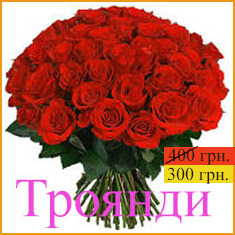
<style>
.page{position:relative;width:235px;height:235px}
.page>*{position:absolute;margin:0}
.t1{font:18px "TimesNewRomanPSMT";color:#1f1d0a}
</style>
<div class="page">
<p class="t1" style="left:168px;top:148px;width:61px;height:17px">400 грн.</p>
<p class="t1" style="left:167px;top:167px;width:61px;height:17px">300 грн.</p>
</div>
